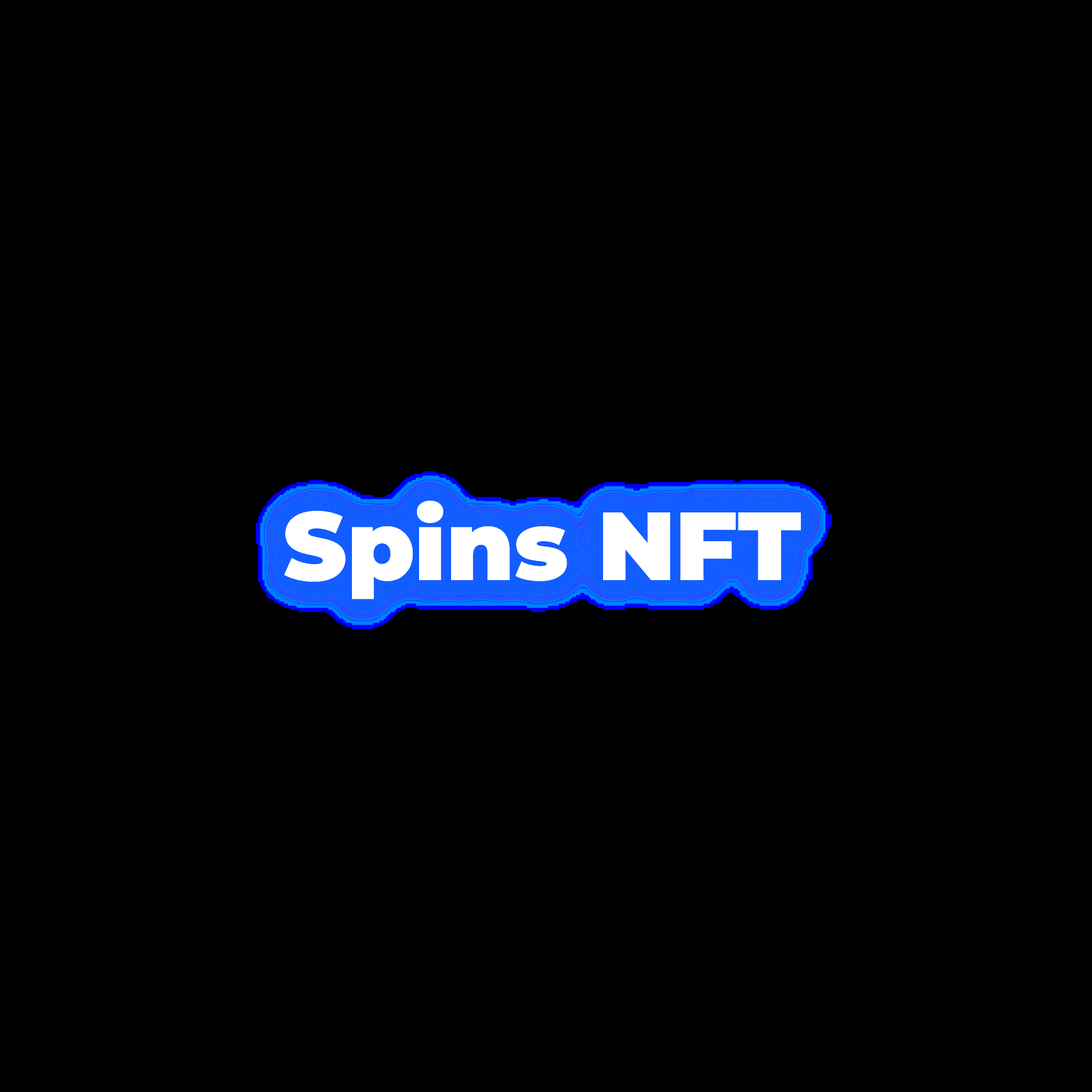
<style>
.page{position:relative;width:1092px;height:1092px;background:#000000}
.page>*{position:absolute;margin:0}
.t1{font:96.7px "Montserrat-Black";color:#ffffff}
</style>
<div class="page">
<p class="t1" style="left:0px;top:0px;width:1092px;height:1092px;text-align:center">Spins NFT</p>
</div>
